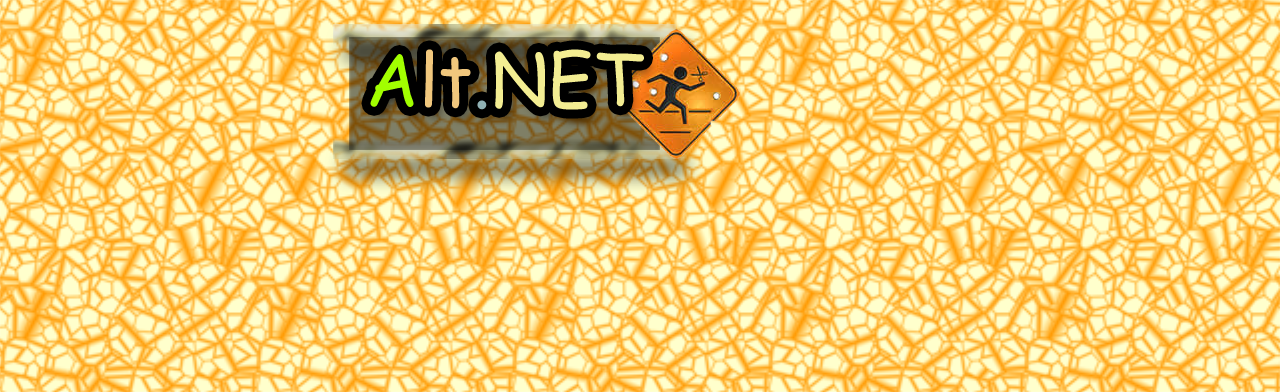
<style>
.page{position:relative;width:1280px;height:392px}
.page>*{position:absolute;margin:0}
.t1{font:72px "ComicSansMS";color:#f3ed92}
.t2{font:72px "Vivaldii";color:#ffffff}
.t3{font:72px "ComicSansMS";color:#a2ff00}
.t4{font:72px "ComicSansMS";color:#f1c77d}
.t5{font:72px "ComicSansMS";color:#90b1b5}
</style>
<div class="page">
<p class="t1" style="left:370px;top:49px;width:274px;height:61px"><span class="t2"><br></span><span class="t3">A</span><span class="t4">lt</span><span class="t5">.</span>NET</p>
</div>
